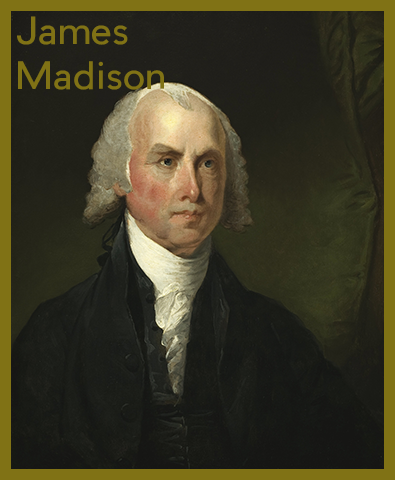
<style>
.page{position:relative;width:395px;height:480px}
.page>*{position:absolute;margin:0}
.t1{font:37px "PierSans";color:#807215}
</style>
<div class="page">
<p class="t1" style="left:17px;top:16px;width:147px;height:74px">James<br>Madison</p>
</div>
